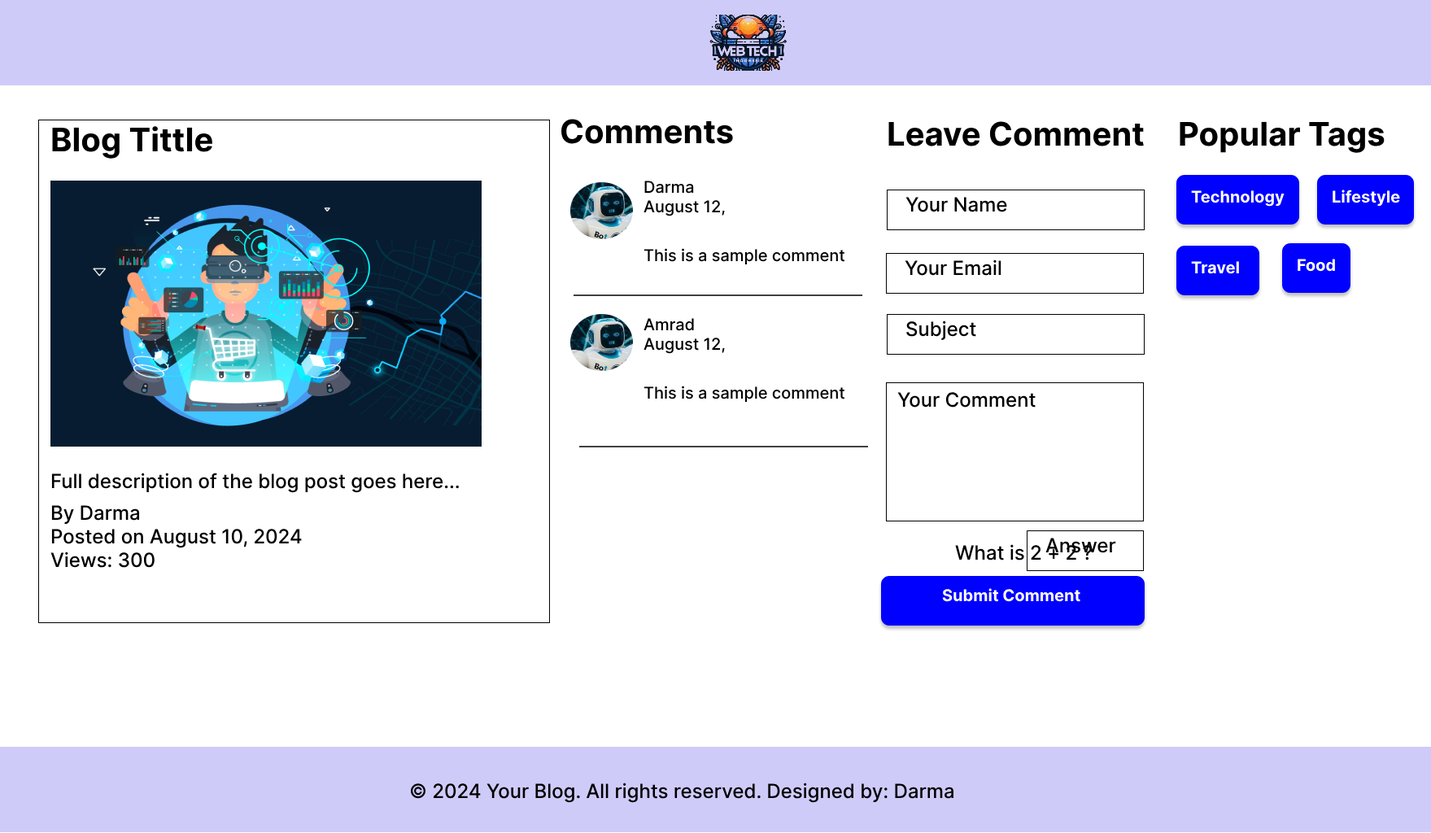
<style>
.page{position:relative;width:1431px;height:833px;background:#ffffff}
.page>*{position:absolute;margin:0}
.t1{font:32.5px "Inter-Bold";color:#000000}
.t2{font:16.3px "Inter-Medium";color:#000000}
.t3{font:19.5px "Inter-Medium";color:#000000}
.t4{font:16.3px "Inter-Bold";color:#ffffff}
</style>
<div class="page">
<p class="t1" style="left:561px;top:119px;width:172px;height:25px">Comments</p>
<p class="t1" style="left:888px;top:121px;width:256px;height:25px">Leave Comment</p>
<p class="t1" style="left:1180px;top:121px;width:205px;height:32px">Popular Tags</p>
<p class="t1" style="left:52px;top:126px;width:160px;height:33px">Blog Tittle</p>
<p class="t2" style="left:644px;top:181px;width:81px;height:35px">Darma<br>August 12, 2024</p>
<p class="t3" style="left:906px;top:197px;width:101px;height:15px">Your Name</p>
<p class="t4" style="left:1191px;top:190px;width:94px;height:17px">Technology</p>
<p class="t4" style="left:1333px;top:190px;width:67px;height:17px">Lifestyle</p>
<p class="t2" style="left:644px;top:248px;width:201px;height:17px">This is a sample comment text. Great blog post!</p>
<p class="t3" style="left:905px;top:260px;width:97px;height:16px">Your Email</p>
<p class="t4" style="left:1191px;top:261px;width:48px;height:13px">Travel</p>
<p class="t4" style="left:1298px;top:259px;width:37px;height:13px">Food</p>
<p class="t2" style="left:644px;top:318px;width:81px;height:36px">Amrad<br>August 12, 2024</p>
<p class="t3" style="left:906px;top:321px;width:70px;height:19px">Subject</p>
<p class="t2" style="left:644px;top:386px;width:201px;height:17px">This is a sample comment text. Great blog post!</p>
<p class="t3" style="left:897px;top:392px;width:139px;height:16px">Your Comment</p>
<p class="t3" style="left:51px;top:473px;width:408px;height:20px">Full description of the blog post goes here...</p>
<p class="t3" style="left:50px;top:505px;width:252px;height:63px">By Darma<br>Posted on August 10, 2024<br>Views: 300<br>Comments: 15</p>
<p class="t3" style="left:955px;top:544px;width:137px;height:17px">What is 2 + 2 ?</p>
<p class="t3" style="left:1046px;top:538px;width:70px;height:15px">Answer</p>
<p class="t4" style="left:942px;top:588px;width:139px;height:14px">Submit Comment</p>
<p class="t3" style="left:410px;top:783px;width:544px;height:20px">© 2024 Your Blog. All rights reserved. Designed by: Darma</p>
</div>
